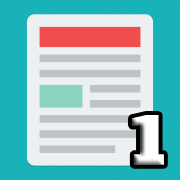
<style>
.page{position:relative;width:180px;height:180px;background:#ecf0f1}
.page>*{position:absolute;margin:0}
.t1{font:64px "AlfaSlabOne-Regular";color:#ffffff}
</style>
<div class="page">
<p class="t1" style="left:131px;top:115px;width:33px;height:50px">1</p>
</div>
